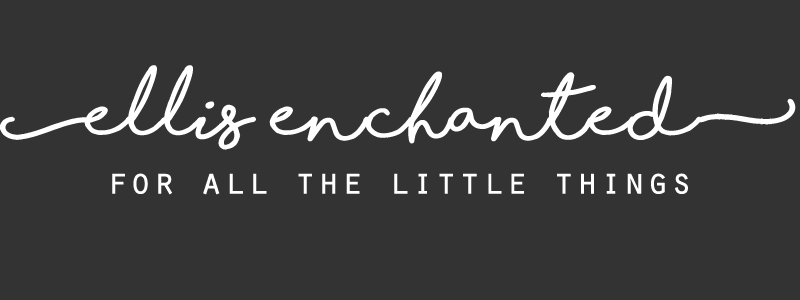
<style>
.page{position:relative;width:800px;height:300px;background:#333333}
.page>*{position:absolute;margin:0}
.t1{font:66.7px "ShorelinesScriptBold";color:#ffffff;font-weight:bold}
.t2{font:37.5px "OratorStd";color:#ffffff;font-weight:bold}
</style>
<div class="page">
<p class="t1" style="left:0px;top:65px;width:796px;height:85px">[ellis enchanted]</p>
<p class="t2" style="left:112px;top:173px;width:576px;height:22px">for all the little things</p>
</div>
